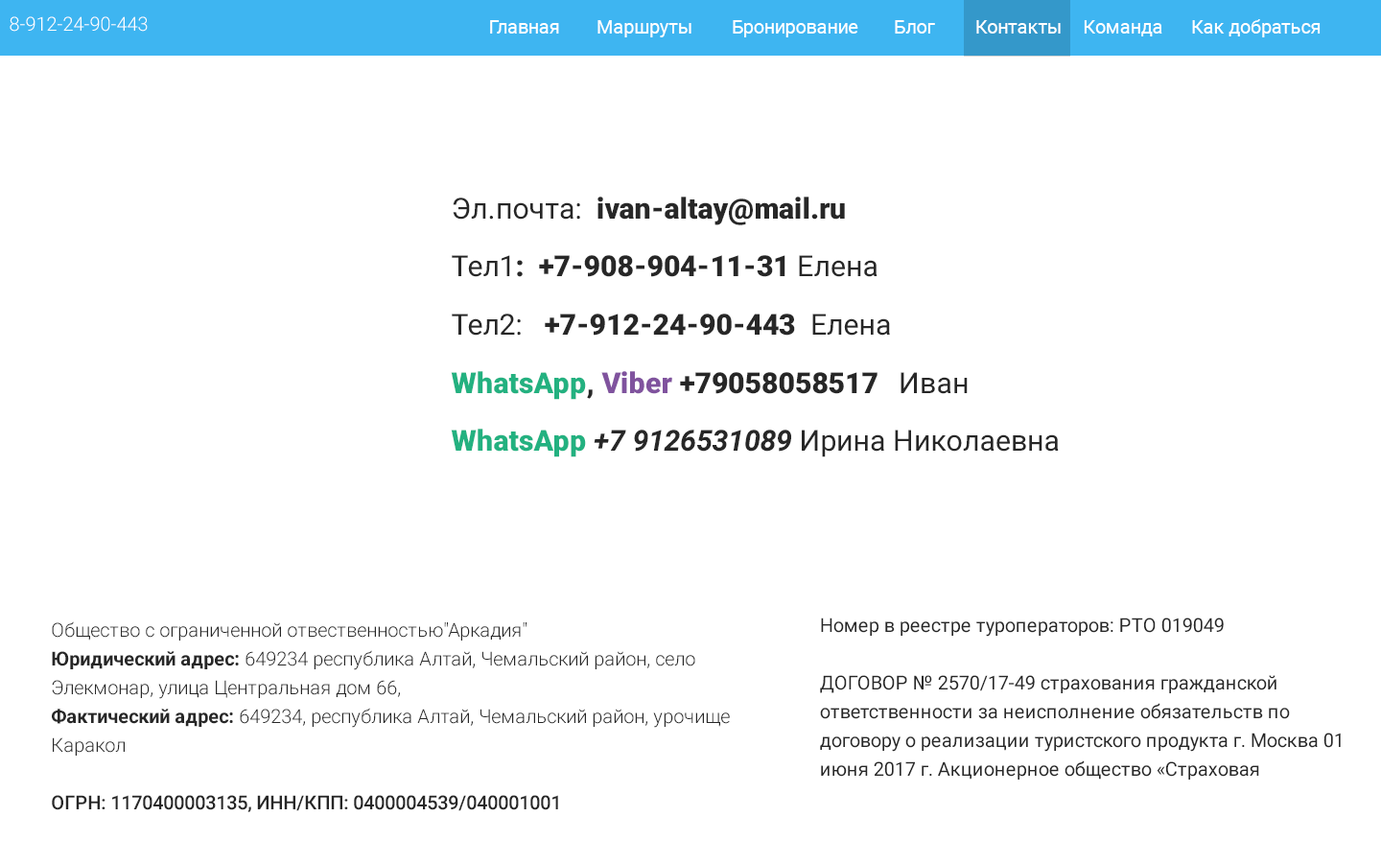
<style>
.page{position:relative;width:1381px;height:863px;background:#ffffff}
.page>*{position:absolute;margin:0}
.t1{font:19.2px "Roboto-Light";color:#ffffff}
.t2{font:18.8px "Roboto-Regular";color:#ffffff}
.t3{font:29.1px/29.1px "Roboto-Black";color:#272727}
.t4{font:29.1px/29.1px "Roboto-Regular";color:#272727}
.t5{font:29.1px/29.1px "Roboto-Black";color:#23b180}
.t6{font:29.1px/29.1px "Roboto-Black";color:#80539e}
.t7{font:29.1px/29.1px "Roboto-BoldItalic";color:#272727}
.t8{font:19.2px/28.8px "Roboto-Regular";color:#272727}
.t9{font:19.2px/28.8px "Roboto-Light";color:#272727}
.t10{font:19.2px/28.8px "Roboto-Bold";color:#272727}
.t11{font:19.2px/28.8px "Roboto-Medium";color:#272727}
</style>
<div class="page">
<p class="t1" style="left:10px;top:16px;width:138px;height:16px">8-912-24-90-443</p>
<p class="t2" style="left:490px;top:19px;width:831px;height:18px">Главная  Маршруты  Бронирование  Блог  Контакты Команда  Как добраться</p>
<p class="t3" style="left:451px;top:197px;width:608px;height:261px"><span class="t4">Эл.почта:  </span>ivan-altay@mail.ru<br><br><span class="t4">Тел1</span>:  +7-908-904-11-31 <span class="t4">Елена<br><br>Тел2:   </span>+7-912-24-90-443<span class="t4">  Елена<br><br></span><span class="t5">WhatsApp</span>, <span class="t6">Viber </span>+79058058517   <span class="t4">Иван<br><br></span><span class="t5">WhatsApp </span><span class="t7">+7 9126531089</span><span class="t4"> Ирина Николаевна</span></p>
<p class="t8" style="left:820px;top:618px;width:521px;height:162px">Номер в реестре туроператоров: РТО 019049<br><br>ДОГОВОР № 2570/17-49 страхования гражданской ответственности за неисполнение обязательств по договору о реализации туристского продукта г. Москва 01 июня 2017 г. Акционерное общество «Страховая компания ГАЙДЕ», Юридический адрес: 191119, г. Санкт- Петербург, Лиговский проспект, дом 108, Лит. А<br><br>Размер финансового обеспечения 500000 рублей</p>
<p class="t9" style="left:52px;top:622px;width:678px;height:190px">Общество с ограниченной отвественностью"Аркадия"                           <br><span class="t10">Юридический адрес:</span> 649234 республика Алтай, Чемальский район, село Элекмонар, улица Центральная дом 66,<br><span class="t10">Фактический адрес:</span> 649234, республика Алтай, Чемальский район, урочище Каракол<br><br><span class="t11">ОГРН: 1170400003135, ИНН/КПП: 0400004539/040001001</span></p>
</div>
